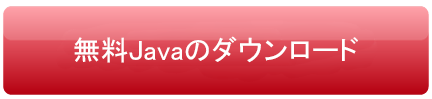
<style>
.page{position:relative;width:432px;height:99px}
.page>*{position:absolute;margin:0}
.t1{font:28px "MS-PGothic";color:#ffffff}
</style>
<div class="page">
<p class="t1" style="left:74px;top:36px;width:284px;height:27px">無料Javaのダウンロード</p>
</div>
